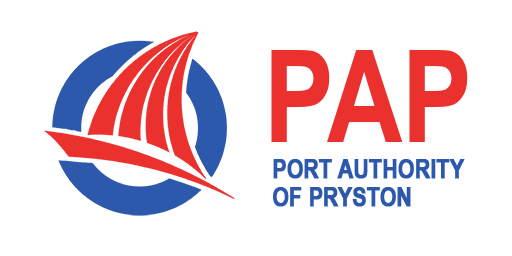
<style>
.page{position:relative;width:512px;height:256px;background:#ffffff}
.page>*{position:absolute;margin:0}
.t1{font:128px "ArialNarrow-Bold";color:#eb312d}
.t2{font:25.6px/28.2px "ArialNarrow-Bold";letter-spacing:-0.01em;color:#2c59ac;text-transform:uppercase;font-weight:bold}
</style>
<div class="page">
<p class="t1" style="left:271px;top:50px;width:197px;height:92px">PAP</p>
<p class="t2" style="left:273px;top:159px;width:192px;height:48px">Port Authority<br>of Pryston</p>
</div>
